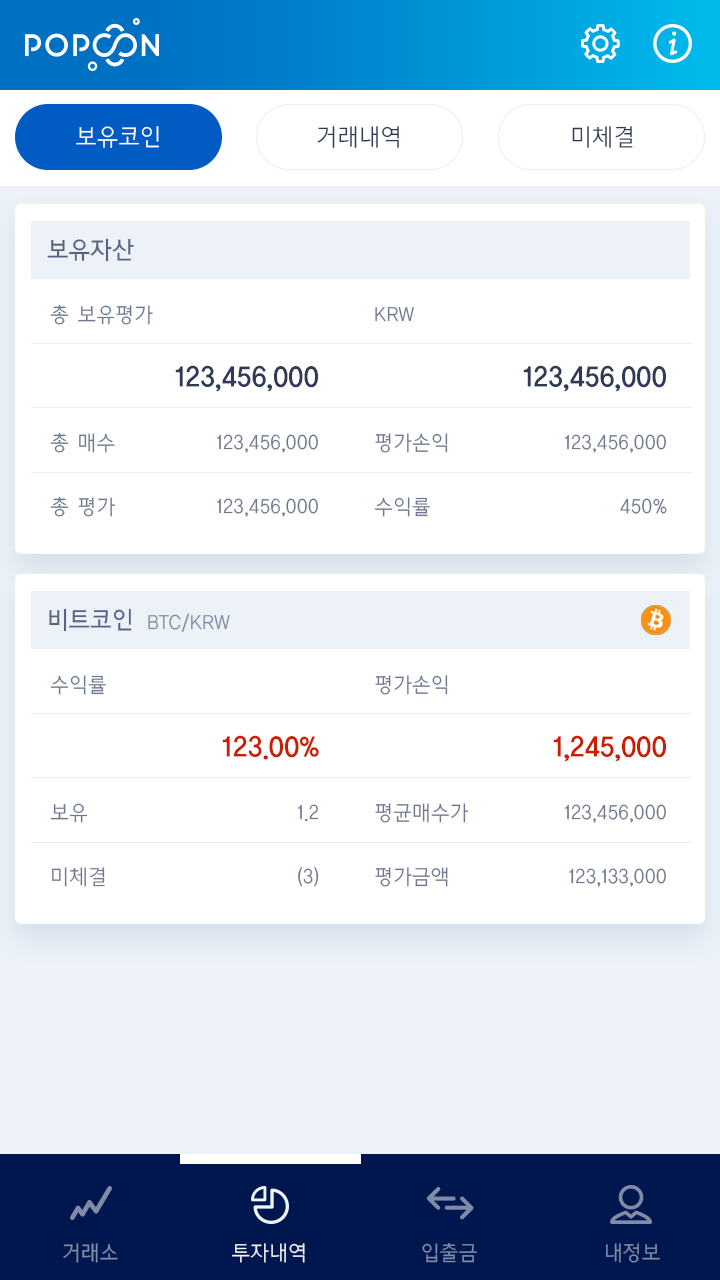
<style>
.page{position:relative;width:720px;height:1280px;background:#ffffff}
.page>*{position:absolute;margin:0}
.t1{font:24px "CreGoL";color:#ffffff}
.t2{font:24px "CreGoL";color:#2f3b56}
.t3{font:24px "CreGoM";color:#586481}
.t4{font:21px/64px "CreGoL";color:#6e788f}
.t5{font:28px "CreGoB";color:#2f3b56}
.t6{font:21px "CreGoL";color:#808aa3}
.t7{font:28px "CreGoB";color:#cb1e00}
.t8{font:21px "CreGoL";color:#808ba7}
.t9{font:21px "CreGoL";color:#ffffff}
</style>
<div class="page">
<p class="t1" style="left:76px;top:126px;width:83px;height:22px">보유코인</p>
<p class="t2" style="left:317px;top:126px;width:82px;height:22px">거래내역</p>
<p class="t2" style="left:572px;top:126px;width:61px;height:22px">미체결</p>
<p class="t3" style="left:47px;top:238px;width:87px;height:24px">보유자산</p>
<p class="t4" style="left:50px;top:305px;width:103px;height:212px">총 보유평가<br><br>총 매수<br>총 평가</p>
<p class="t4" style="left:374px;top:307px;width:74px;height:210px">KRW<br><br>평가손익<br>수익률</p>
<p class="t5" style="left:175px;top:365px;width:143px;height:27px">123,456,000</p>
<p class="t5" style="left:523px;top:365px;width:143px;height:27px">123,456,000</p>
<p class="t4" style="left:216px;top:434px;width:102px;height:83px;text-align:right">123,456,000<br>123,456,000</p>
<p class="t4" style="left:564px;top:434px;width:103px;height:80px;text-align:right">123,456,000<br>450%</p>
<p class="t3" style="left:49px;top:608px;width:83px;height:24px">비트코인</p>
<p class="t6" style="left:148px;top:613px;width:82px;height:19px">BTC/KRW</p>
<p class="t4" style="left:50px;top:675px;width:56px;height:212px">수익률<br><br>보유<br>미체결</p>
<p class="t4" style="left:375px;top:675px;width:94px;height:212px">평가손익<br><br>평균매수가<br>평가금액</p>
<p class="t7" style="left:222px;top:735px;width:97px;height:25px">123.00%</p>
<p class="t7" style="left:553px;top:735px;width:113px;height:27px">1,245,000</p>
<p class="t4" style="left:297px;top:804px;width:22px;height:83px;text-align:right">1.2<br>(3)</p>
<p class="t4" style="left:564px;top:804px;width:102px;height:83px;text-align:right">123,456,000<br>123,133,000</p>
<p class="t8" style="left:63px;top:1243px;width:55px;height:20px">거래소</p>
<p class="t9" style="left:232px;top:1243px;width:73px;height:20px">투자내역</p>
<p class="t8" style="left:422px;top:1243px;width:55px;height:20px">입출금</p>
<p class="t8" style="left:606px;top:1243px;width:54px;height:20px">내정보</p>
</div>
